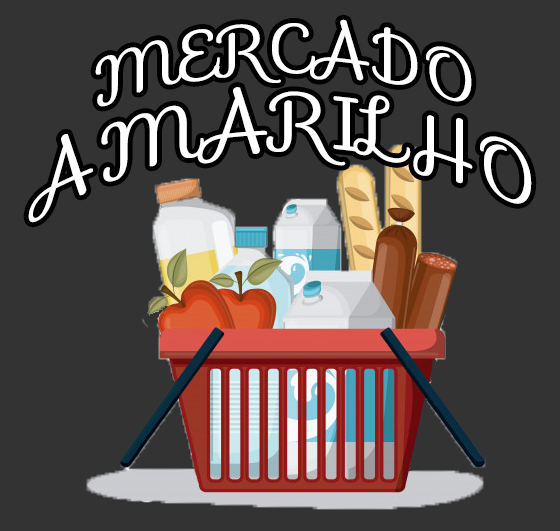
<style>
.page{position:relative;width:560px;height:531px;background:#333333}
.page>*{position:absolute;margin:0}
.t1{font:74.7px/77.3px "Sofia-Regular";letter-spacing:0.01em;color:#ffffff;font-weight:bold}
.t2{font:64px/77.3px "Sofia-Regular";letter-spacing:0.01em;color:#ffffff;font-weight:bold}
</style>
<div class="page">
<p class="t1" style="left:28px;top:19px;width:504px;height:204px;text-align:center"><span class="t2">MERCADO <br></span>AMARILHO</p>
</div>
